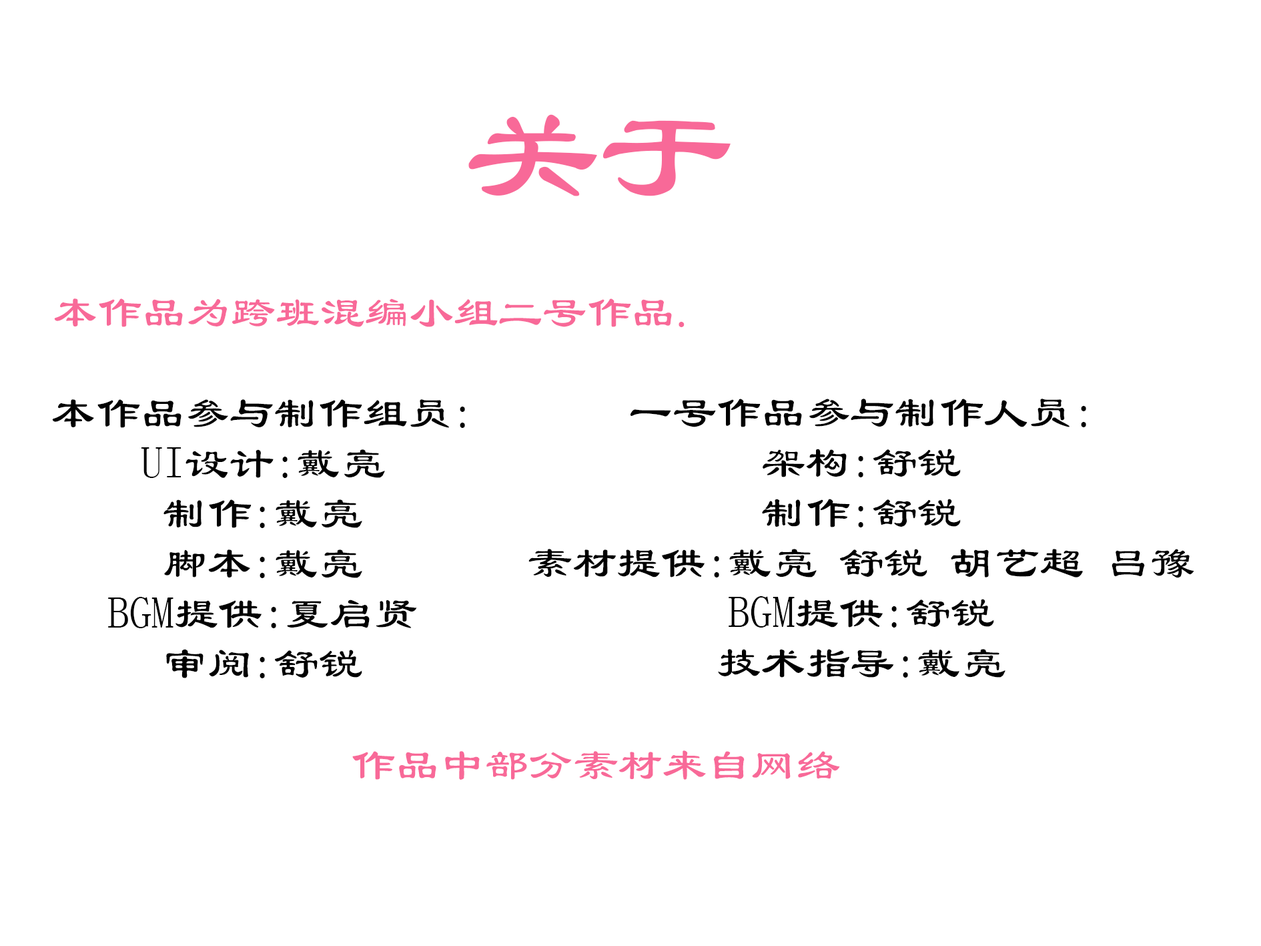
<style>
.page{position:relative;width:1261px;height:946px;background:#ffffff}
.page>*{position:absolute;margin:0}
.t1{font:133.5px "LiSu";color:#f86998}
.t2{font:44.5px "LiSu";color:#f86998}
.t3{font:44.5px/50px "LiSu";color:#000000}
</style>
<div class="page">
<p class="t1" style="left:468px;top:114px;width:263px;height:82px">关于</p>
<p class="t2" style="left:54px;top:298px;width:631px;height:29px">本作品为跨班混编小组二号作品.</p>
<p class="t3" style="left:52px;top:399px;width:413px;height:279px;text-align:center">本作品参与制作组员:<br>UI设计:戴亮<br>制作:戴亮<br>脚本:戴亮<br>BGM提供:夏启贤<br>审阅:舒锐</p>
<p class="t3" style="left:528px;top:398px;width:666px;height:279px;text-align:center">一号作品参与制作人员:<br>架构:舒锐<br>制作:舒锐<br>素材提供:戴亮 舒锐 胡艺超 吕豫<br>BGM提供:舒锐<br>技术指导:戴亮</p>
<p class="t2" style="left:352px;top:750px;width:488px;height:29px">作品中部分素材来自网络</p>
</div>
